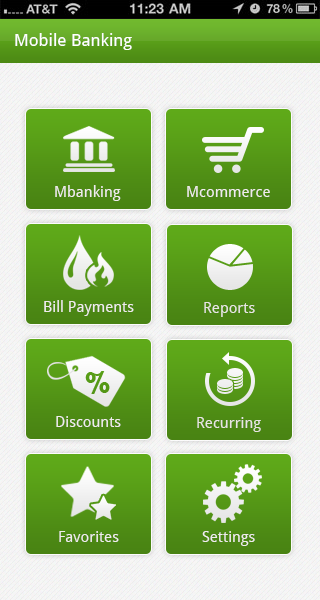
<style>
.page{position:relative;width:320px;height:600px}
.page>*{position:absolute;margin:0}
.t1{font:17px "DroidSans";color:#ffffff}
.t2{font:15px "DroidSans";color:#f0ecec}
.t3{font:15px "DroidSans";color:#e8e6e2}
</style>
<div class="page">
<p class="t1" style="left:15px;top:33px;width:117px;height:17px">Mobile Banking</p>
<p class="t2" style="left:55px;top:185px;width:66px;height:16px">Mbanking</p>
<p class="t2" style="left:187px;top:186px;width:83px;height:11px">Mcommerce</p>
<p class="t2" style="left:44px;top:300px;width:90px;height:16px">Bill Payments</p>
<p class="t3" style="left:204px;top:302px;width:51px;height:15px">Reports</p>
<p class="t2" style="left:56px;top:416px;width:65px;height:11px">Discounts</p>
<p class="t3" style="left:197px;top:417px;width:64px;height:15px">Recurring</p>
<p class="t2" style="left:59px;top:531px;width:60px;height:11px">Favorites</p>
<p class="t2" style="left:202px;top:531px;width:53px;height:15px">Settings</p>
</div>
